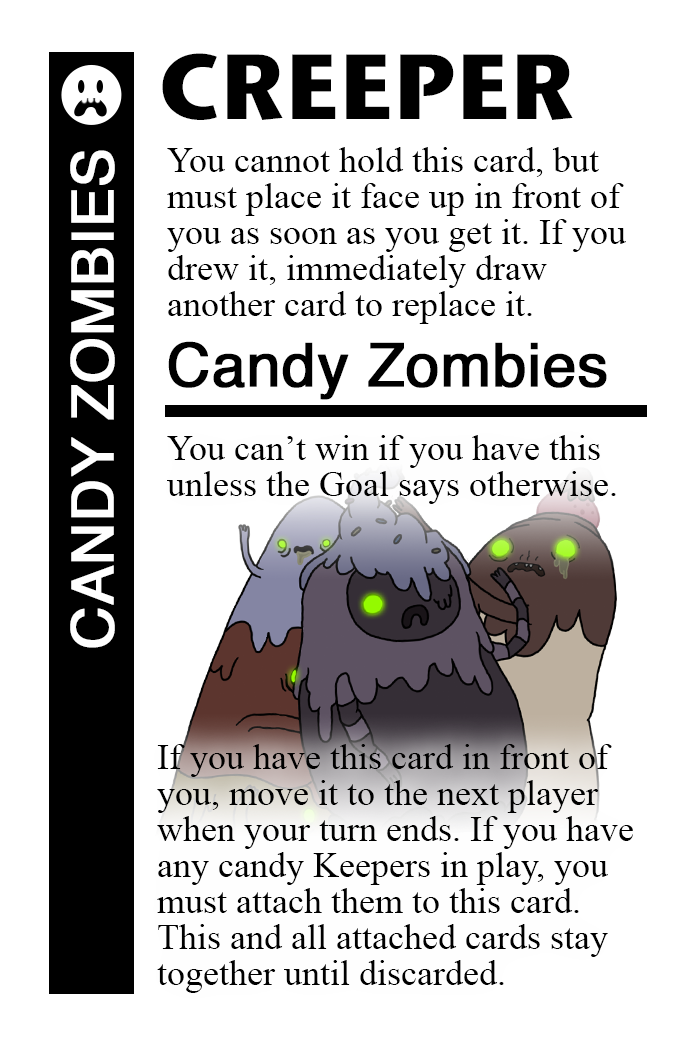
<style>
.page{position:relative;width:700px;height:1042px;background:#ffffff}
.page>*{position:absolute;margin:0}
.t1{font:92px "StoneSansITC-Bold";color:#000000}
.t2{font:58px "Helvetica";color:#ffffff;font-weight:bold}
.t3{font:36px/36px "TimesNewRomanPSMT";color:#000000}
.t4{font:60px "Helvetica";color:#000000;font-weight:bold}
</style>
<div class="page">
<p class="t1" style="left:162px;top:53px;width:411px;height:67px">CREEPER</p>
<p class="t2" style="left:70px;top:150px;width:45px;height:498px;rotate:-90deg">CANDY ZOMBIES</p>
<p class="t3" style="left:167px;top:147px;width:459px;height:177px">You cannot hold this card, but<br>must place it face up in front of<br>you as soon as you get it. If you <br>drew it, immediately draw<br>another card to replace it.</p>
<p class="t4" style="left:168px;top:341px;width:439px;height:59px">Candy Zombies</p>
<p class="t3" style="left:167px;top:435px;width:449px;height:69px">You can’t win if you have this <br>unless the Goal says otherwise.</p>
<p class="t3" style="left:157px;top:744px;width:476px;height:249px">If you have this card in front of <br>you, move it to the next player<br>when your turn ends. If you have<br>any candy Keepers in play, you<br>must attach them to this card.<br>This and all attached cards stay <br>together until discarded.</p>
</div>
